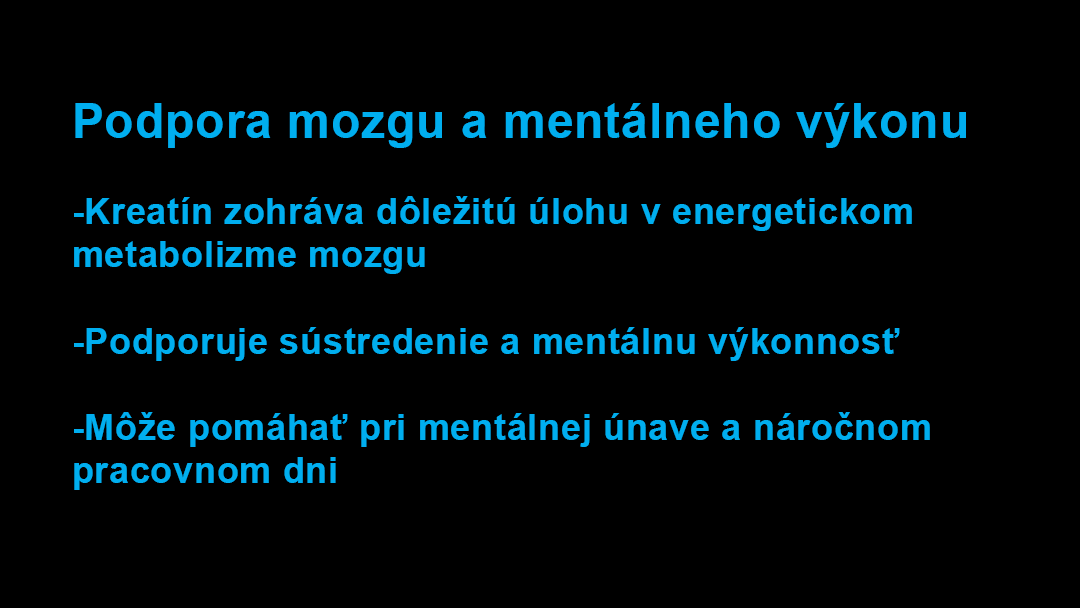
<style>
.page{position:relative;width:1080px;height:608px;background:#000000}
.page>*{position:absolute;margin:0}
.t1{font:36px "Arial-BoldMT";letter-spacing:0.02em;color:#00aeef}
.t2{font:48px "Arial-BoldMT";letter-spacing:0.02em;color:#00aeef}
</style>
<div class="page">
<p class="t1" style="left:74px;top:103px;width:892px;height:387px"><span class="t2">Podpora mozgu a mentálneho výkonu<br></span><br>-Kreatín zohráva dôležitú úlohu v energetickom <br>metabolizme mozgu<br><br>-Podporuje sústredenie a mentálnu výkonnosť<br><br>-Môže pomáhať pri mentálnej únave a náročnom <br>pracovnom dni</p>
</div>
